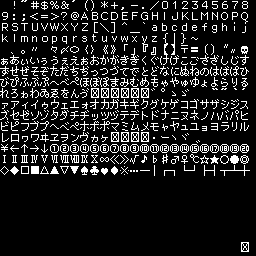
<style>
.page{position:relative;width:256px;height:256px;background:#000000}
.page>*{position:absolute;margin:0}
.t1{font:10px/11px "PixelMplus10-Regular";color:#ffffff}
.t2{font:10px/11px "KozGoPr6N-Regular";color:#ffffff}
</style>
<div class="page">
<p class="t1" style="left:0px;top:0px;width:250px;height:252px">！”＃＄％＆’（）＊＋，－．／０１２３４５６７８<br>９：；＜＝＞？＠ＡＢＣＤＥＦＧＨＩＪＫＬＭＮＯＰＱ<br>ＲＳＴＵＶＷＸＹＺ［＼］＾＿｀ａｂｃｄｅｆｇｈｉｊ<br>ｋｌｍｎｏｐｑｒｓｔｕｖｗｘｙｚ｛｜｝～<br>　、。〃　々〆〇〈〉《》「」『』【】〒〓〔〕〝〟〠<br>ぁあぃいぅうぇえぉおかがきぎくぐけげこごさざしじす<br>ずせぜそぞただちぢっつづてでとどなにぬねのはばぱひ<br>びぴふぶぷへべぺほぼぽまみむめもゃやゅゆょよらりる<br>れろゎわゐゑをんゔ<span class="t2">☒☒☒☒☒☒</span>゛゜ゝゞ　　“”‘’<br>ァアィイゥウェエォオカガキギクグケゲコゴサザシジス<br>ズセゼソゾタダチヂッツヅテデトドナニヌネノハバパヒ<br>ビピフブプヘベペホボポマミムメモャヤュユョヨラリル<br>レロヮワヰヱヲンヴヵヶ<span class="t2">☒☒☒☒</span>・ーヽヾヿ<br>￥←↑→↓①②③④⑤⑥⑦⑧⑨⑩⑪⑫⑬⑭⑮⑯⑰⑱⑲⑳<br>ⅠⅡⅢⅣⅤⅥⅦⅧⅨⅩ∞≪≫√♪♭♯♂♀℃☆★○●◎<br>◇◆□■△▲▽▼♠♣♥♦※…─│┌┐└┘├┤┬┴┼<br><br><br><br><br><br><br>　　　　　　　　　　　　　　　　　　　　　　　　<span class="t2">☒</span></p>
</div>
